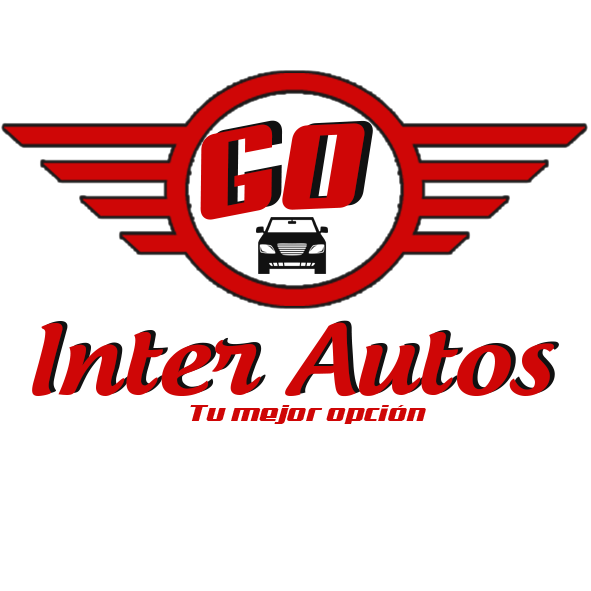
<style>
.page{position:relative;width:591px;height:591px;background:#ffffff}
.page>*{position:absolute;margin:0}
.t1{font:121.1px "Aero";color:#cf0606}
.t2{font:92.3px "AndrogyneMedium";color:#cf0606;scale:1.15 1}
.t3{font:23.2px "Aero";color:#cf0606;scale:1.29 1}
</style>
<div class="page">
<p class="t1" style="left:200px;top:124px;width:73px;height:96px;rotate:-11deg">G</p>
<p class="t1" style="left:210px;top:120px;width:73px;height:96px;rotate:-11deg">G</p>
<p class="t1" style="left:282px;top:123px;width:83px;height:87px;rotate:-2deg">O</p>
<p class="t1" style="left:291px;top:120px;width:82px;height:88px;rotate:-3deg">O</p>
<p class="t2" style="left:32px;top:322px;width:522px;height:75px">Inter Autos</p>
<p class="t2" style="left:37px;top:320px;width:522px;height:75px">Inter Autos</p>
<p class="t3" style="left:190px;top:405px;width:236px;height:19px">Tu mejor opción</p>
</div>
